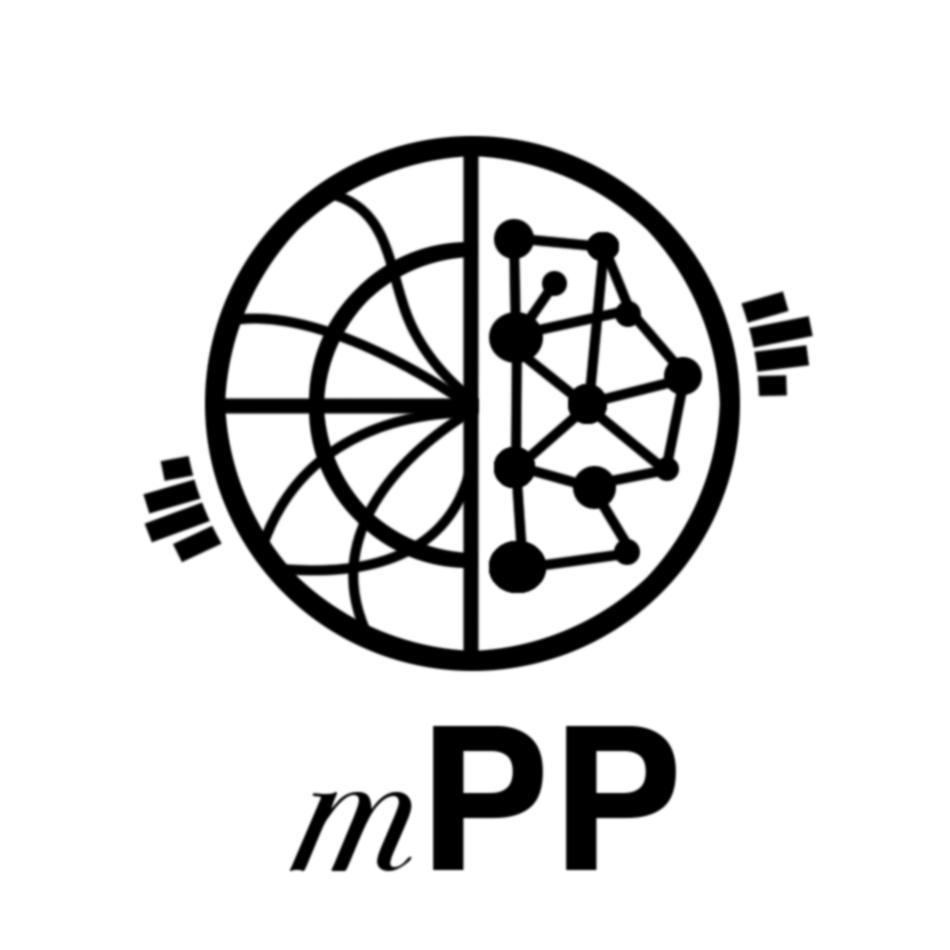
<style>
.page{position:relative;width:950px;height:950px;background:#ffffff}
.page>*{position:absolute;margin:0}
.t1{font:200px "Helvetica-Bold";color:#000000}
.t2{font:180px "BodoniSvtyTwoITCTT-BookIta";color:#000000}
</style>
<div class="page">
<p class="t1" style="left:289px;top:726px;width:387px;height:145px"><span class="t2">m</span>PP</p>
</div>
